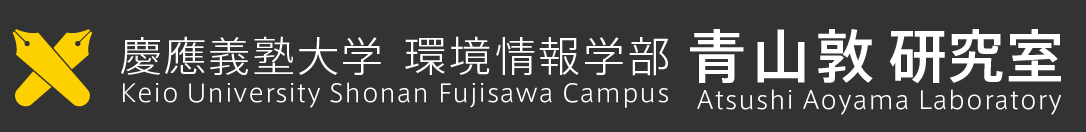
<style>
.page{position:relative;width:1086px;height:132px;background:#333333}
.page>*{position:absolute;margin:0}
.t1{font:58px "AxisStd-Medium";letter-spacing:0.1em;color:#ffffff}
.t2{font:58px "AxisStd-Medium";letter-spacing:0.01em;color:#ffffff}
.t3{font:42px "AxisStd-Light";letter-spacing:0.05em;color:#ffffff}
.t4{font:42px "AxisStd-Light";letter-spacing:0.065em;color:#ffffff}
.t5{font:24px "AxisStd-Light";letter-spacing:0.05em;color:#ffffff}
</style>
<div class="page">
<p class="t1" style="left:690px;top:29px;width:183px;height:54px">青山敦</p>
<p class="t2" style="left:889px;top:29px;width:172px;height:55px">研究室</p>
<p class="t3" style="left:121px;top:36px;width:260px;height:39px">慶應義塾大学</p>
<p class="t4" style="left:405px;top:36px;width:264px;height:40px">環境情報学部</p>
<p class="t5" style="left:123px;top:82px;width:545px;height:26px">Keio University Shonan Fujisawa Campus</p>
<p class="t5" style="left:697px;top:89px;width:364px;height:26px">Atsushi Aoyama Laboratory</p>
</div>
